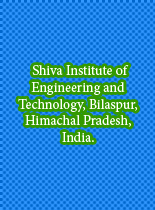
<style>
.page{position:relative;width:155px;height:210px;background:#298ef5}
.page>*{position:absolute;margin:0}
.t1{font:14px "MinionPro-Regular";color:#ffffff}
</style>
<div class="page">
<p class="t1" style="left:18px;top:65px;width:120px;height:77px;text-align:center">Shiva Institute of<br>Engineering and<br>Technology, Bilaspur,<br>Himachal Pradesh,<br>India.</p>
</div>
